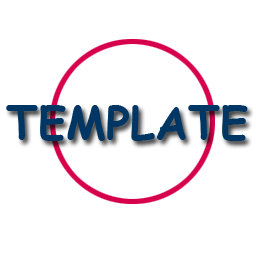
<style>
.page{position:relative;width:256px;height:256px;background:#ffffff}
.page>*{position:absolute;margin:0}
.t1{font:45.3px "ComicSansMS-Bold";color:#003663}
</style>
<div class="page">
<p class="t1" style="left:6px;top:105px;width:242px;height:36px">TEMPLATE</p>
</div>
